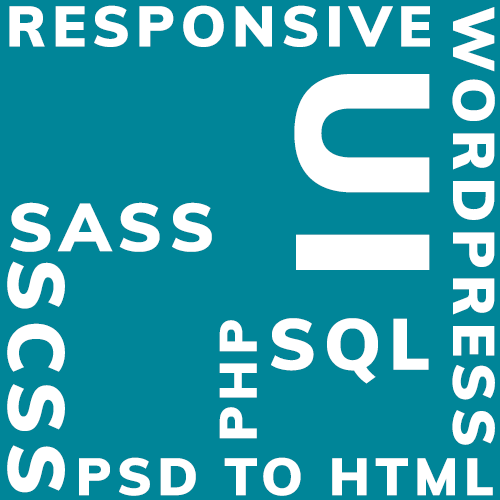
<style>
.page{position:relative;width:500px;height:500px;background:#008598}
.page>*{position:absolute;margin:0}
.t1{font:56.6px "Muli-Black";letter-spacing:0.105em;color:#ffffff;text-transform:uppercase}
.t2{font:58.1px "Muli-Black";letter-spacing:0.105em;color:#ffffff;text-transform:uppercase}
.t3{font:186.8px "Muli-Black";letter-spacing:0.105em;color:#ffffff;text-transform:uppercase}
.t4{font:67.1px "Muli-Black";letter-spacing:0.105em;color:#ffffff;text-transform:uppercase}
.t5{font:78.9px "Muli-Black";letter-spacing:0.105em;color:#ffffff;text-transform:uppercase}
.t6{font:71.6px "Muli-Black";letter-spacing:0.105em;color:#ffffff;text-transform:uppercase}
.t7{font:51.9px "Muli-Black";letter-spacing:0.105em;color:#ffffff;text-transform:uppercase}
.t8{font:52.1px "Muli-Black";letter-spacing:0.105em;color:#ffffff;text-transform:uppercase}
</style>
<div class="page">
<p class="t1" style="left:9px;top:5px;width:421px;height:42px">RESPONSIVE</p>
<p class="t2" style="left:452px;top:7px;width:43px;height:438px;rotate:90deg">WordPress</p>
<p class="t3" style="left:294px;top:74px;width:136px;height:196px;rotate:90deg">UI</p>
<p class="t4" style="left:10px;top:202px;width:202px;height:50px">SASS</p>
<p class="t5" style="left:7px;top:261px;width:58px;height:232px;rotate:90deg">SCSS</p>
<p class="t6" style="left:271px;top:318px;width:158px;height:66px">SQL</p>
<p class="t7" style="left:219px;top:320px;width:38px;height:119px;rotate:-90deg">PHP</p>
<p class="t8" style="left:79px;top:457px;width:414px;height:39px">PSD to HTML</p>
</div>
